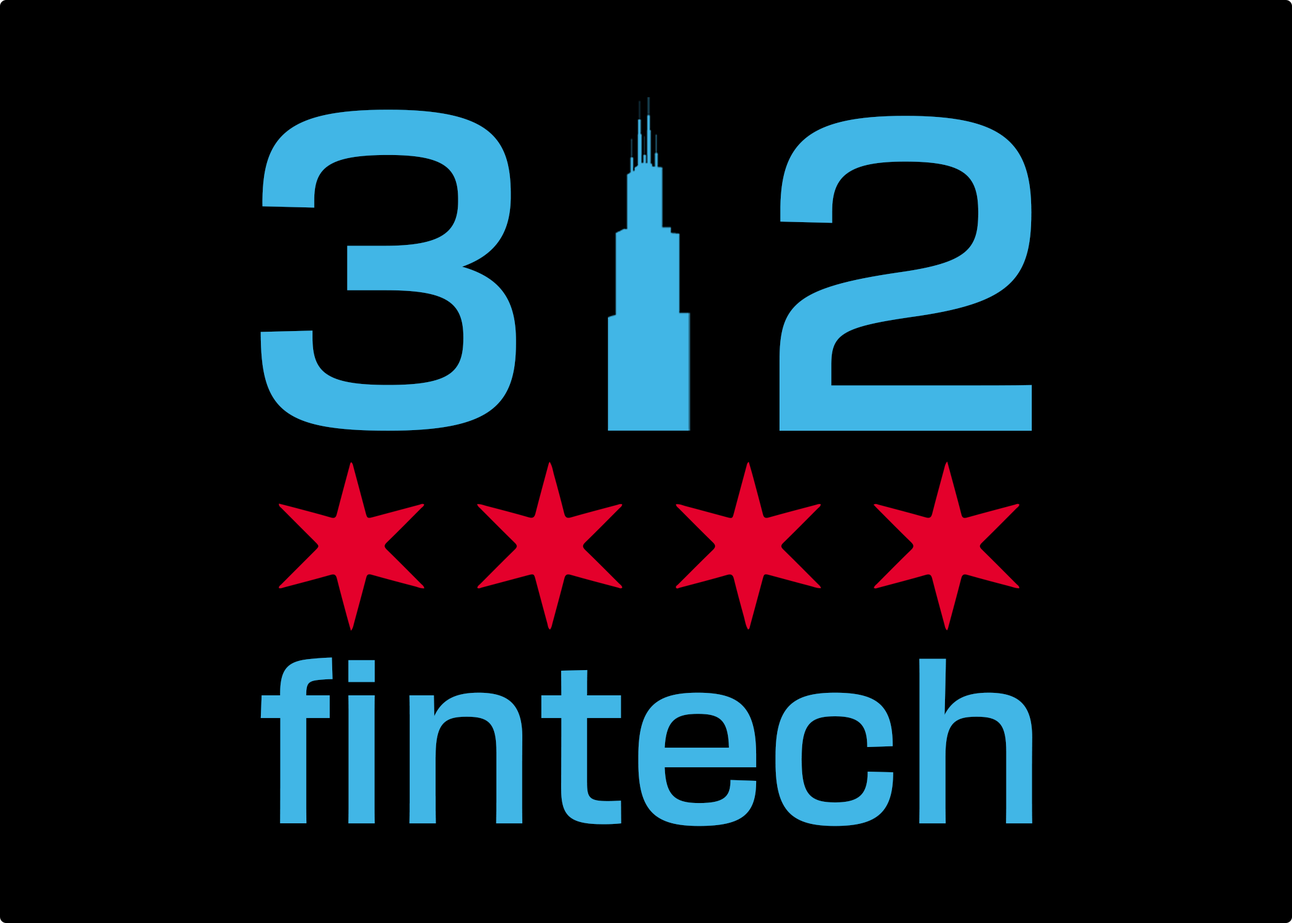
<style>
.page{position:relative;width:1292px;height:923px;background:#000000}
.page>*{position:absolute;margin:0}
.t1{font:434.8px "Transducer-Medium";letter-spacing:-0.005em;color:#41b6e6}
.t2{font:219.8px "Transducer-Medium";letter-spacing:-0.005em;color:#41b6e6}
</style>
<div class="page">
<p class="t1" style="left:260px;top:110px;width:256px;height:321px">3</p>
<p class="t1" style="left:780px;top:116px;width:252px;height:315px">2</p>
<p class="t2" style="left:260px;top:657px;width:772px;height:169px">fintech</p>
</div>
